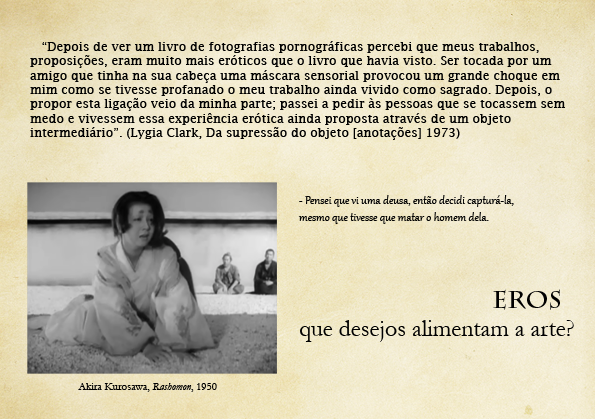
<style>
.page{position:relative;width:595px;height:419px}
.page>*{position:absolute;margin:0}
.t1{font:12px "LucidaFax";color:#000000}
.t2{font:14px "Gabriola";color:#000000}
.t3{font:24px "CharlemagneStd-Bold";color:#000000}
.t4{font:24px "Garamond";color:#000000}
.t5{font:11px "Garamond";color:#000000}
.t6{font:11px "Garamond-Italic";color:#000000}
</style>
<div class="page">
<p class="t1" style="left:30px;top:41px;width:535px;height:99px">“Depois de ver um livro de fotografias pornográficas percebi que meus trabalhos, <br>proposições, eram muito mais eróticos que o livro que havia visto. Ser tocada por um <br>amigo que tinha na sua cabeça uma máscara sensorial provocou um grande choque em <br>mim como se tivesse profanado o meu trabalho ainda vivido como sagrado. Depois, o <br>propor esta ligação veio da minha parte; passei a pedir às pessoas que se tocassem sem <br>medo e vivessem essa experiência erótica ainda proposta através de um objeto <br>intermediário”. (Lygia Clark, Da supressão do objeto [anotações] 1973)</p>
<p class="t2" style="left:298px;top:195px;width:216px;height:29px">- Pensei que vi uma deusa, então decidi capturá-la, <br>mesmo que tivesse que matar o homem dela.</p>
<p class="t3" style="left:493px;top:289px;width:67px;height:21px">EROS</p>
<p class="t4" style="left:300px;top:320px;width:274px;height:22px">que desejos alimentam a arte?</p>
<p class="t5" style="left:78px;top:383px;width:139px;height:9px">Akira Kurosawa, <span class="t6">Rashomon</span>, 1950</p>
</div>
